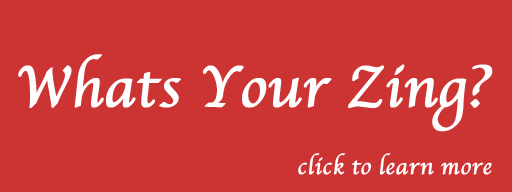
<style>
.page{position:relative;width:512px;height:192px;background:#cc3333}
.page>*{position:absolute;margin:0}
.t1{font:59.8px "Apple-Chancery";color:#ffffff;font-weight:bold}
.t2{font:23.9px "Apple-Chancery";color:#ffffff;font-weight:bold}
</style>
<div class="page">
<p class="t1" style="left:18px;top:54px;width:475px;height:78px">Whats Your Zing?</p>
<p class="t2" style="left:298px;top:153px;width:194px;height:22px">click to learn more</p>
</div>
